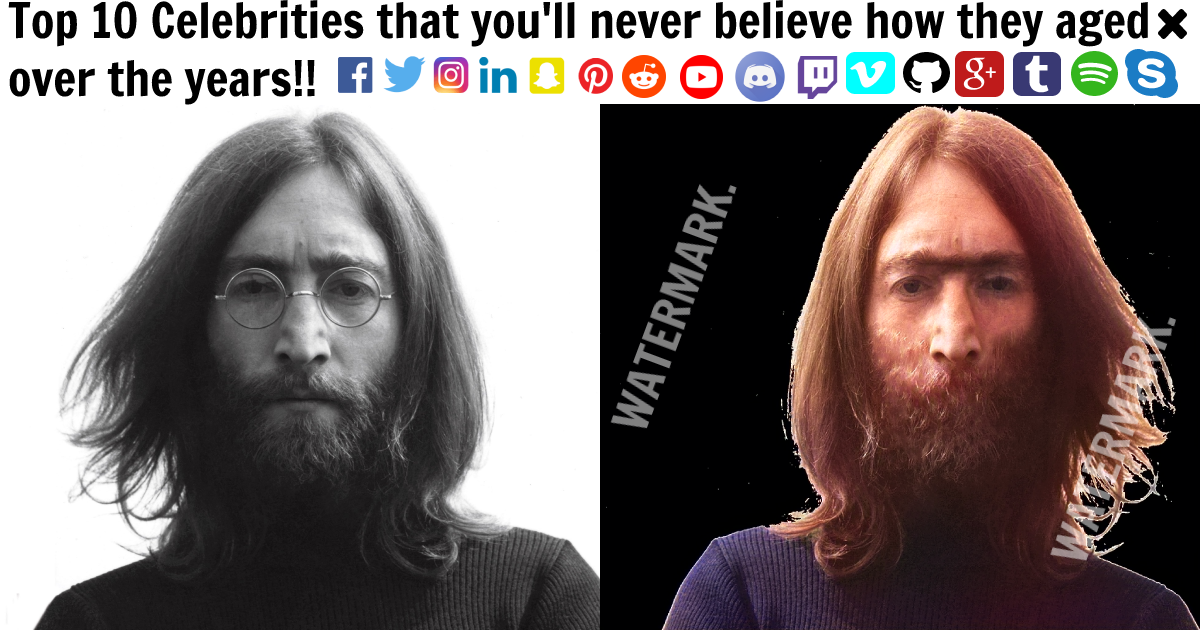
<style>
.page{position:relative;width:1200px;height:630px;background:#ffffff}
.page>*{position:absolute;margin:0}
.t1{font:48px "FrancoisOne-Regular";color:#000000}
</style>
<div class="page">
<p class="t1" style="left:8px;top:0px;width:1140px;height:105px">Top 10 Celebrities that you'll never believe how they aged over the years!!</p>
</div>
